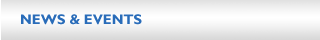
<style>
.page{position:relative;width:320px;height:40px}
.page>*{position:absolute;margin:0}
.t1{font:14px "GillSans-Bold";color:#296cb9;text-transform:uppercase}
</style>
<div class="page">
<p class="t1" style="left:21px;top:14px;width:121px;height:11px">news &amp; events</p>
</div>
